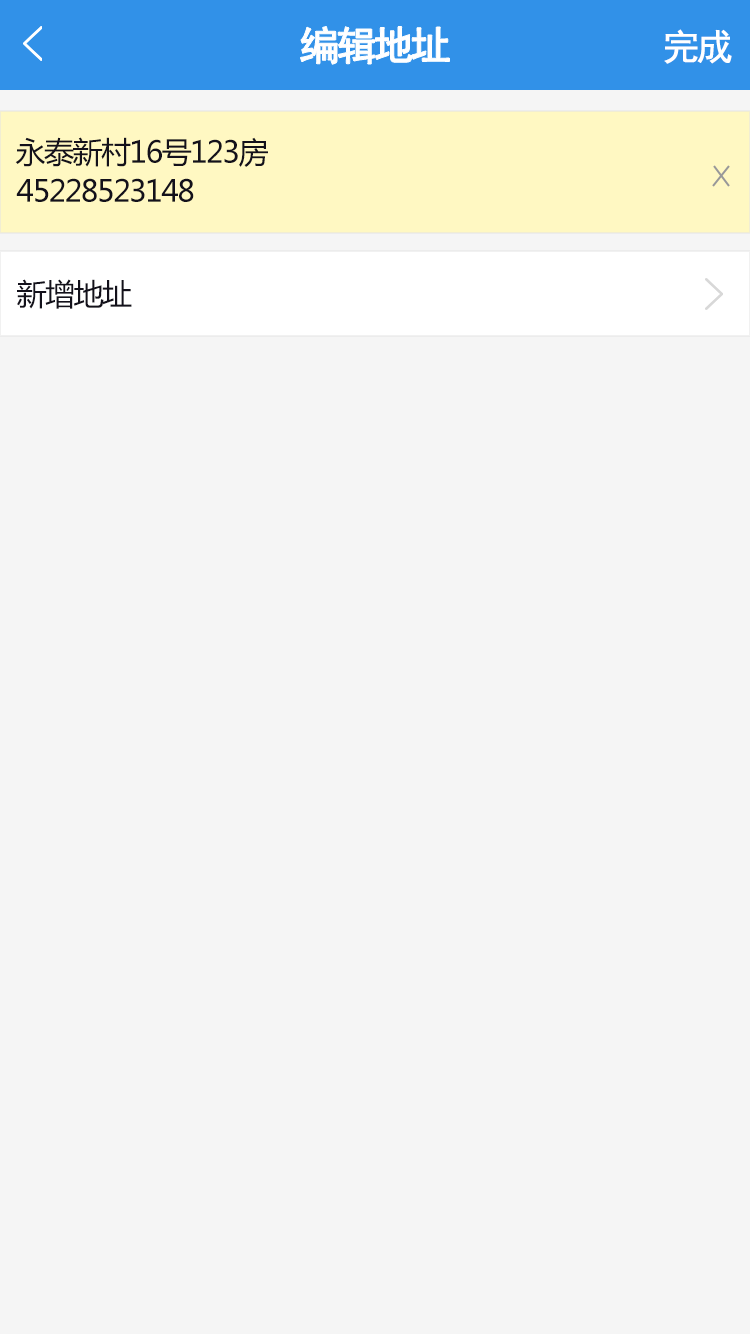
<style>
.page{position:relative;width:750px;height:1334px;background:#f5f5f5}
.page>*{position:absolute;margin:0}
.t1{font:40px "SimHei";letter-spacing:-0.1em;color:#ffffff;font-weight:bold}
.t2{font:36px "SimHei";letter-spacing:-0.1em;color:#ffffff;font-weight:bold}
.t3{font:30px "MicrosoftYaHei";letter-spacing:-0.05em;color:#13111b}
</style>
<div class="page">
<p class="t1" style="left:300px;top:26px;width:150px;height:39px">编辑地址</p>
<p class="t2" style="left:664px;top:29px;width:68px;height:35px">完成</p>
<p class="t3" style="left:15px;top:137px;width:253px;height:30px">永泰新村16号123房</p>
<p class="t3" style="left:16px;top:178px;width:178px;height:24px">45228523148</p>
<p class="t3" style="left:17px;top:279px;width:115px;height:30px">新增地址</p>
</div>
